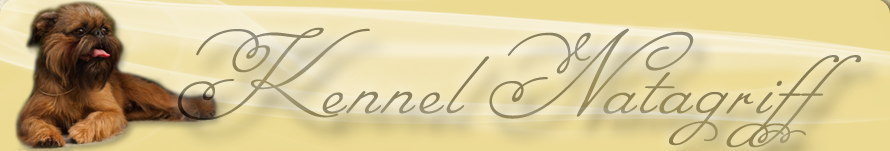
<style>
.page{position:relative;width:890px;height:151px}
.page>*{position:absolute;margin:0}
.t1{font:120px "Angelica";letter-spacing:0.05em;color:#92885f}
</style>
<div class="page">
<p class="t1" style="left:177px;top:27px;width:685px;height:121px">Kennel Natagriff</p>
</div>
